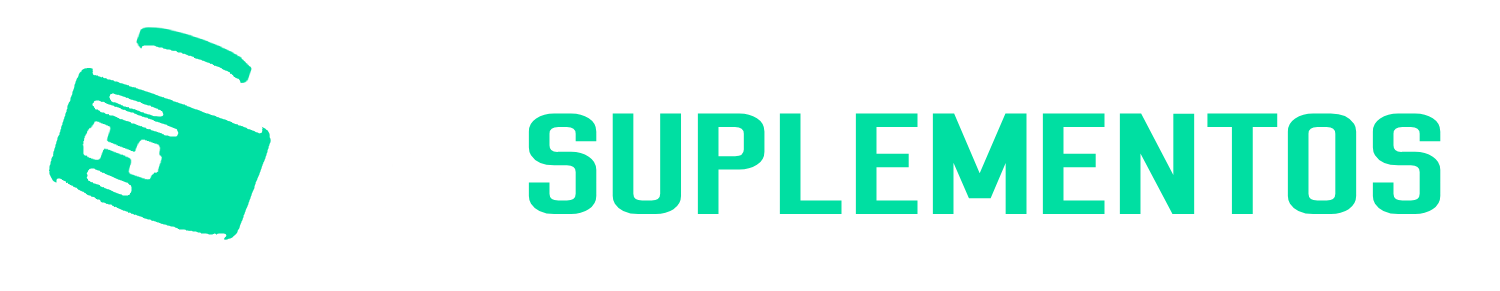
<style>
.page{position:relative;width:1500px;height:291px;background:#ffffff}
.page>*{position:absolute;margin:0}
.t1{font:208.7px "Dhurjati";color:#00dfa2;scale:0.9 1}
.t2{font:208.7px "Dhurjati";color:#ffffff;scale:0.9 1}
</style>
<div class="page">
<p class="t1" style="left:292px;top:113px;width:1149px;height:101px"><span class="t2">RM </span>SUPLEMENTOS</p>
</div>
